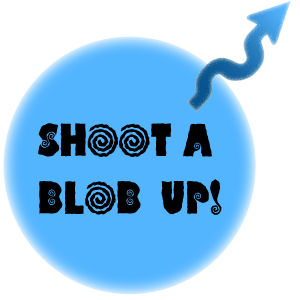
<style>
.page{position:relative;width:300px;height:300px;background:#ffffff}
.page>*{position:absolute;margin:0}
.t1{font:48px "HippoCritic";color:#000000}
</style>
<div class="page">
<p class="t1" style="left:38px;top:123px;width:184px;height:92px;text-align:center">SHOOT A <br>BLOB  UP!</p>
</div>
